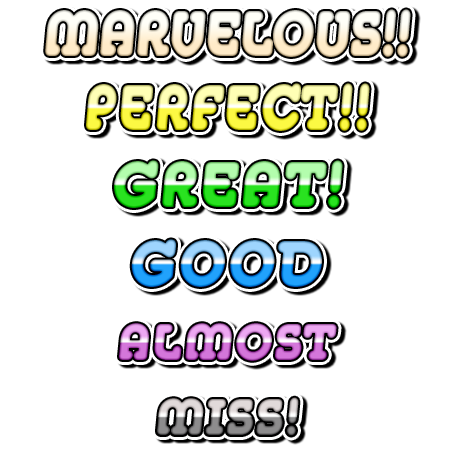
<style>
.page{position:relative;width:456px;height:456px;background:#ffffff}
.page>*{position:absolute;margin:0}
.t1{font:62.4px "Media-ExtraBoldIta";letter-spacing:0.01em;scale:0.85 1}
.t2{font:62.4px "Media-ExtraBoldIta";letter-spacing:0.064em;scale:0.83 1}
.t3{font:62.4px "Media-ExtraBoldIta";letter-spacing:0.064em;scale:0.92 1}
.t4{font:49.9px "Media-ExtraBoldIta";letter-spacing:0.064em;scale:0.92 1}
</style>
<div class="page">
<p class="t1" style="left:45px;top:9px;width:366px;height:48px">MARVELOUS!!</p>
<p class="t2" style="left:86px;top:83px;width:284px;height:48px">PERFECT!!</p>
<p class="t3" style="left:114px;top:160px;width:229px;height:48px">GREAT!</p>
<p class="t3" style="left:131px;top:239px;width:191px;height:48px">GOOD</p>
<p class="t4" style="left:119px;top:323px;width:218px;height:38px">ALMOST</p>
<p class="t4" style="left:157px;top:397px;width:142px;height:39px">MISS!</p>
</div>
